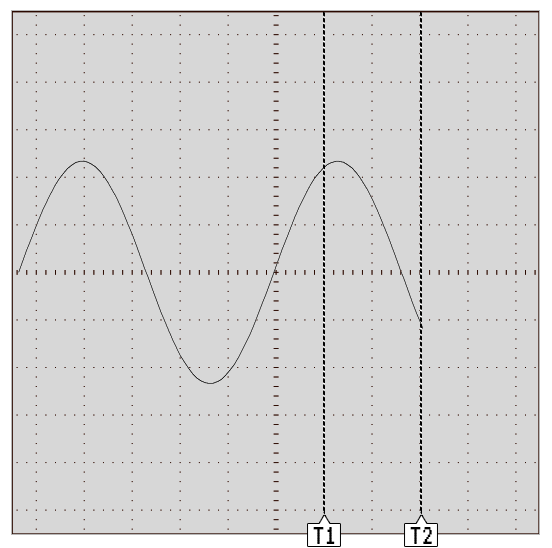
<style>
.page{position:relative;width:552px;height:548px;background:#d7d7d7}
.page>*{position:absolute;margin:0}
.t1{font:30px "VT323-Regular";color:#000000}
</style>
<div class="page">
<p class="t1" style="left:313px;top:527px;width:22px;height:17px">T1</p>
<p class="t1" style="left:410px;top:527px;width:22px;height:17px">T2</p>
</div>
